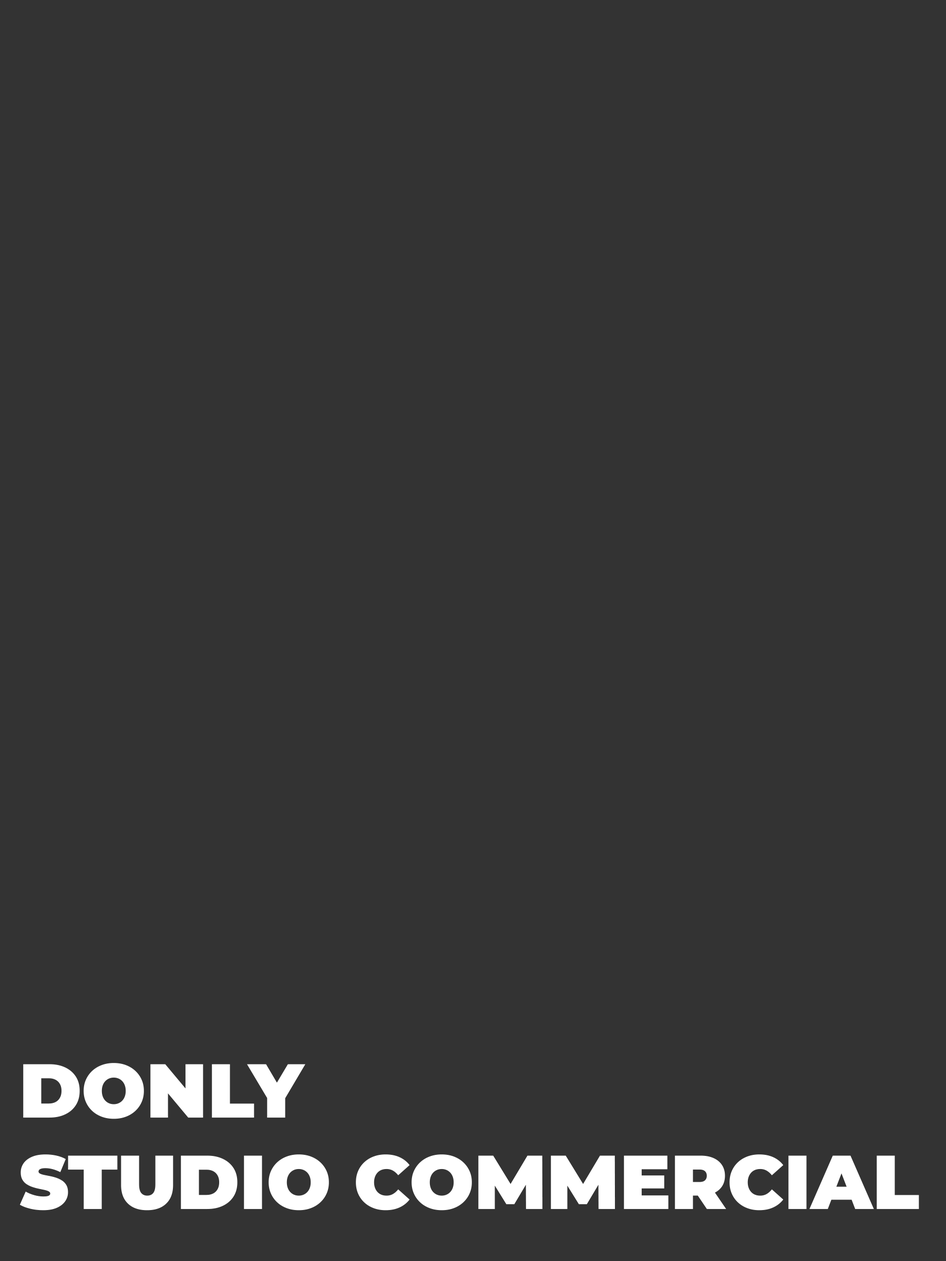
<style>
.page{position:relative;width:946px;height:1261px;background:#333333}
.page>*{position:absolute;margin:0}
.t1{font:76.2px "Montserrat-Black";color:#ffffff}
</style>
<div class="page">
<p class="t1" style="left:19px;top:1063px;width:900px;height:147px">DONLY <br>STUDIO COMMERCIAL</p>
</div>
